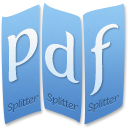
<style>
.page{position:relative;width:128px;height:128px}
.page>*{position:absolute;margin:0}
.t1{font:63px "FertigoPro-Regular";color:#eaf2f8;scale:1.07 1}
.t2{font:63px "FertigoPro-Regular";color:#e8f1f8;scale:1.07 1}
.t3{font:63px "FertigoPro-Regular";color:#e2eef7;scale:1.08 1}
.t4{font:10.5px "SovbaRegular";color:#305783;scale:1.07 1}
.t5{font:10.5px "SovbaRegular";color:#305783;scale:1.06 1}
.t6{font:10.5px "SovbaRegular";color:#315784;scale:1.07 1}
</style>
<div class="page">
<p class="t1" style="left:7px;top:28px;width:31px;height:54px;rotate:-21deg">p</p>
<p class="t2" style="left:90px;top:23px;width:29px;height:73px;rotate:-21deg">f</p>
<p class="t3" style="left:45px;top:31px;width:35px;height:52px;rotate:22deg">d</p>
<p class="t4" style="left:7px;top:95px;width:32px;height:18px;rotate:-20deg">Splitter</p>
<p class="t5" style="left:47px;top:93px;width:32px;height:17px;rotate:19deg">Splitter</p>
<p class="t6" style="left:87px;top:95px;width:32px;height:18px;rotate:-20deg">Splitter</p>
</div>
